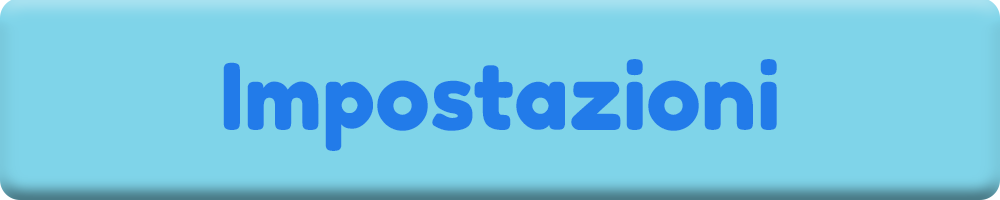
<style>
.page{position:relative;width:1000px;height:200px;background:#7fd4e9}
.page>*{position:absolute;margin:0}
.t1{font:91.7px "FredokaOne-Regular";color:#227be9}
</style>
<div class="page">
<p class="t1" style="left:223px;top:59px;width:554px;height:92px">Impostazioni</p>
</div>
